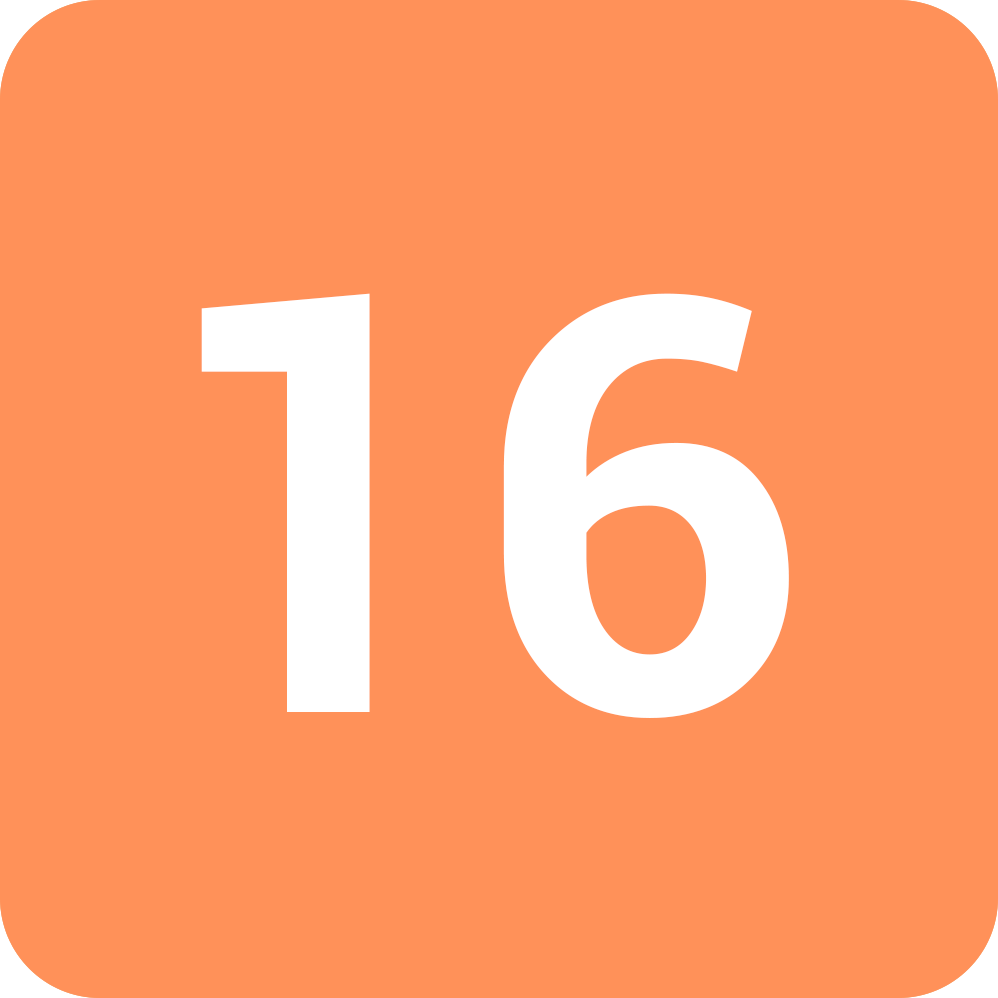
<style>
.page{position:relative;width:998px;height:998px;background:#ff9159}
.page>*{position:absolute;margin:0}
.t1{font:580px "Roboto-Bold";color:#ffffff}
</style>
<div class="page">
<p class="t1" style="left:201px;top:293px;width:588px;height:425px">16</p>
</div>
